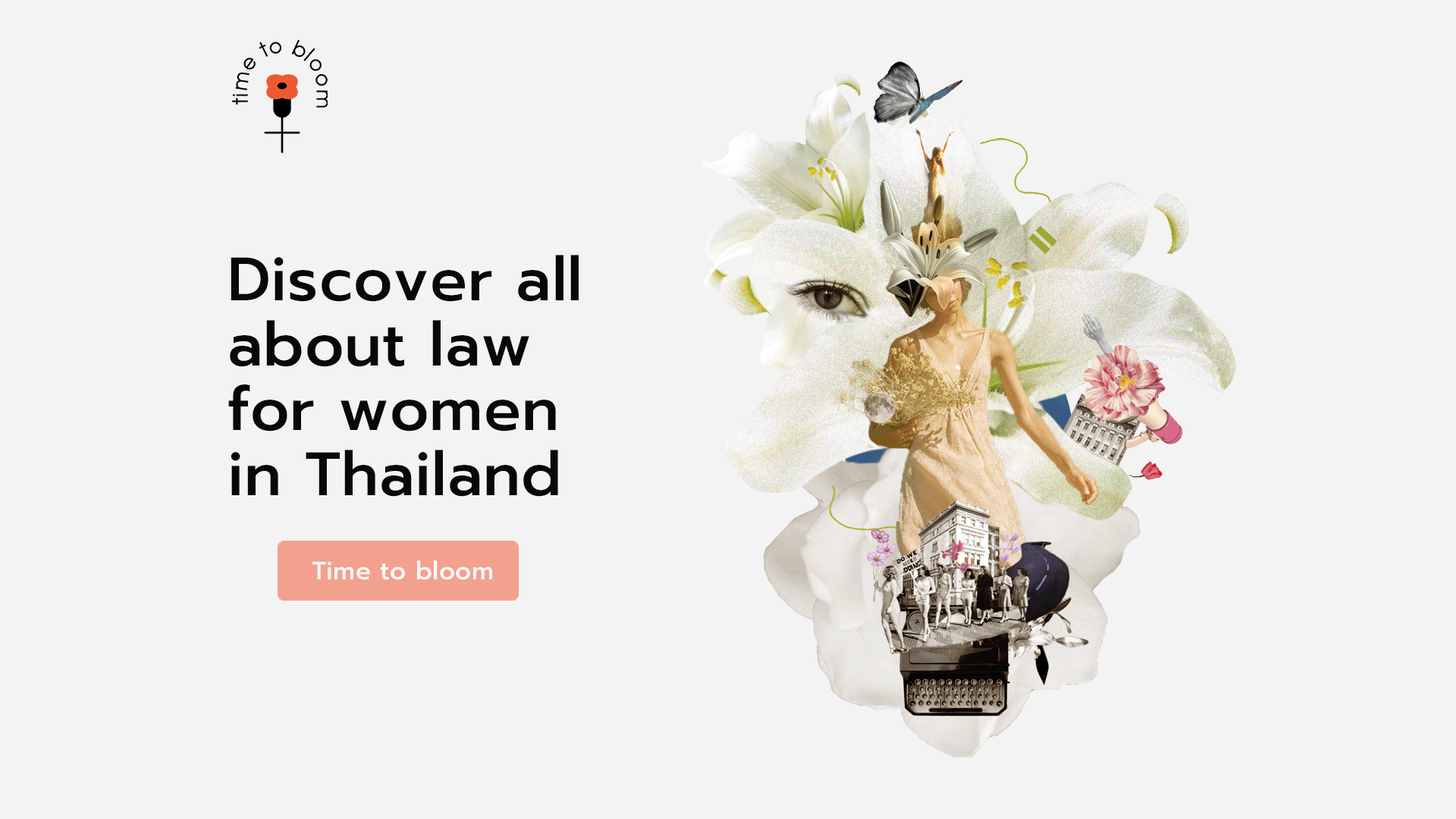
<style>
.page{position:relative;width:1456px;height:819px;background:#f3f3f3}
.page>*{position:absolute;margin:0}
.t1{font:61.2px/65px "Prompt-Medium";letter-spacing:0.01em;color:#0a0707}
.t2{font:25.1px "Prompt-Medium";letter-spacing:0.01em;color:#faf7f7}
</style>
<div class="page">
<p class="t1" style="left:228px;top:255px;width:351px;height:242px">Discover all <br>about law <br>for women <br>in Thailand</p>
<p class="t2" style="left:312px;top:560px;width:180px;height:20px">Time to bloom</p>
</div>
